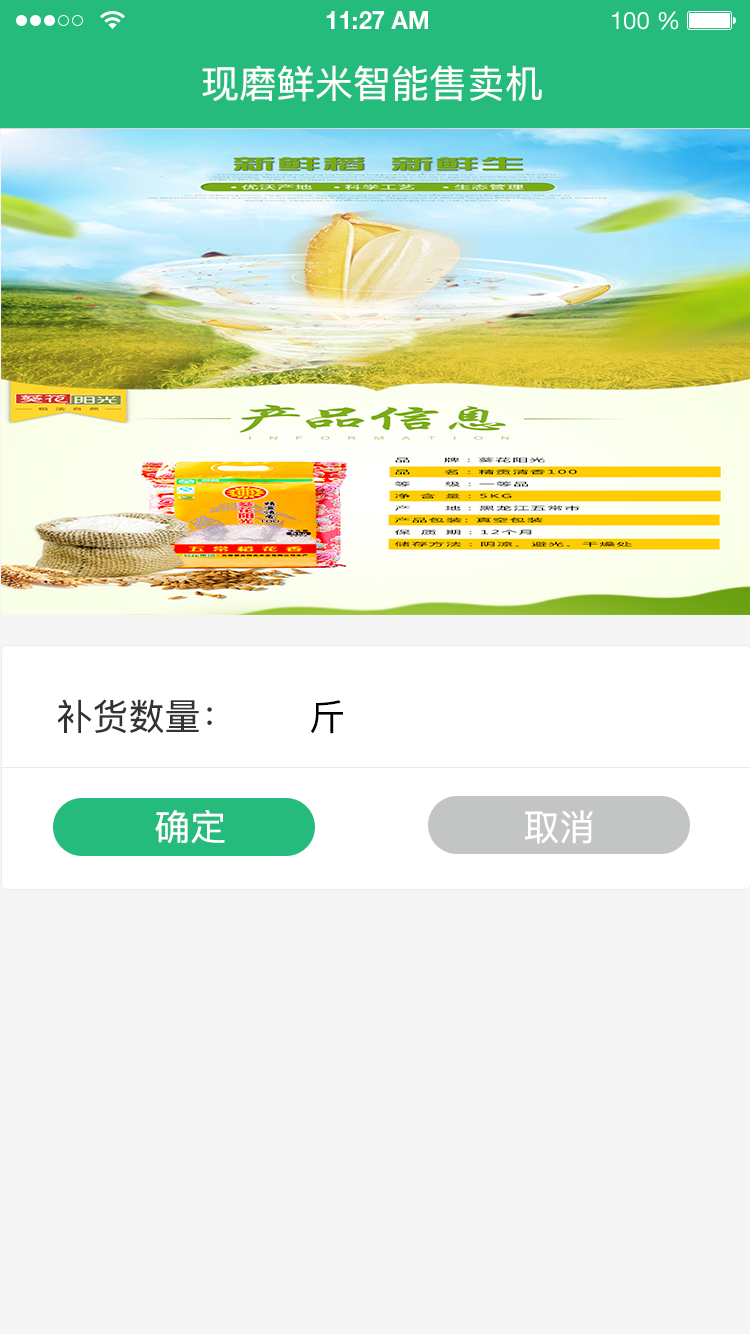
<style>
.page{position:relative;width:750px;height:1334px;background:#f5f5f5}
.page>*{position:absolute;margin:0}
.t1{font:24px "HelveticaNeueLTStd-Bd";color:#ffffff}
.t2{font:24px "HelveticaNeueLTStd-Roman";color:#ffffff}
.t3{font:38px "PingFangSC-Regular";color:#ffffff}
.t4{font:36px "PingFangSC-Regular";color:#333333}
.t5{font:36px "PingFangSC-Regular";color:#000000}
.t6{font:36px "PingFangSC-Regular";color:#ffffff}
</style>
<div class="page">
<p class="t1" style="left:326px;top:11px;width:102px;height:18px">11:27 AM</p>
<p class="t2" style="left:612px;top:11px;width:67px;height:19px">100 %</p>
<p class="t3" style="left:202px;top:65px;width:340px;height:37px">现磨鲜米智能售卖机</p>
<p class="t4" style="left:57px;top:699px;width:155px;height:35px">补货数量：</p>
<p class="t5" style="left:311px;top:700px;width:32px;height:34px">斤</p>
<p class="t6" style="left:155px;top:809px;width:70px;height:35px">确定</p>
<p class="t6" style="left:524px;top:810px;width:69px;height:34px">取消</p>
</div>
